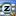
<style>
.page{position:relative;width:16px;height:16px}
.page>*{position:absolute;margin:0}
.t1{font:8px "PalatinoLinotype-Bold";color:#000000;scale:1.1 1}
</style>
<div class="page">
<p class="t1" style="left:4px;top:6px;width:6px;height:5px">Z</p>
</div>
